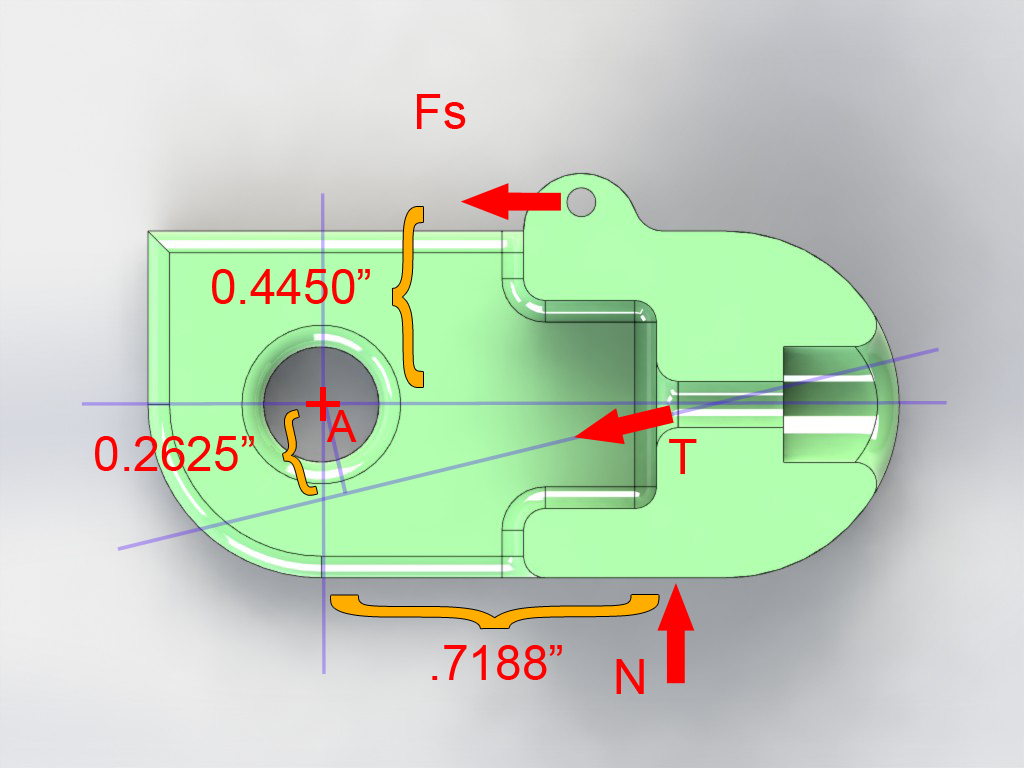
<style>
.page{position:relative;width:1024px;height:768px}
.page>*{position:absolute;margin:0}
.t1{font:48px "ArialMT";color:#ff0000}
.t2{font:193.2px "ArialMT";color:#ffae00;scale:0.55 1}
.t3{font:72px "ArialMT";color:#ff0000}
.t4{font:91.6px "ArialMT";color:#ffae00;scale:0.93 1}
.t5{font:44px "ArialMT";color:#ff0000}
.t6{font:348.5px "ArialMT";color:#ffae00;scale:0.33 1}
</style>
<div class="page">
<p class="t1" style="left:417px;top:94px;width:49px;height:35px">Fs</p>
<p class="t2" style="left:392px;top:207px;width:31px;height:180px">{</p>
<p class="t1" style="left:212px;top:269px;width:158px;height:35px">0.4450”</p>
<p class="t3" style="left:306px;top:387px;width:34px;height:34px">+</p>
<p class="t4" style="left:283px;top:410px;width:35px;height:85px;rotate:-13deg">{</p>
<p class="t5" style="left:326px;top:410px;width:31px;height:32px">A</p>
<p class="t1" style="left:95px;top:436px;width:159px;height:35px">0.2625”</p>
<p class="t1" style="left:669px;top:439px;width:28px;height:35px">T</p>
<p class="t6" style="left:331px;top:595px;width:328px;height:34px;rotate:-90deg">{</p>
<p class="t1" style="left:432px;top:645px;width:130px;height:35px">.7188”</p>
<p class="t1" style="left:616px;top:659px;width:28px;height:35px">N</p>
</div>
